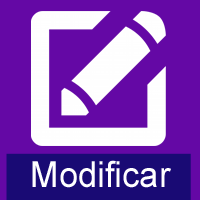
<style>
.page{position:relative;width:200px;height:200px;background:#6408a5}
.page>*{position:absolute;margin:0}
.t1{font:36px "ArialMT";color:#ffffff;scale:0.96 1}
</style>
<div class="page">
<p class="t1" style="left:32px;top:160px;width:139px;height:28px">Modificar</p>
</div>
